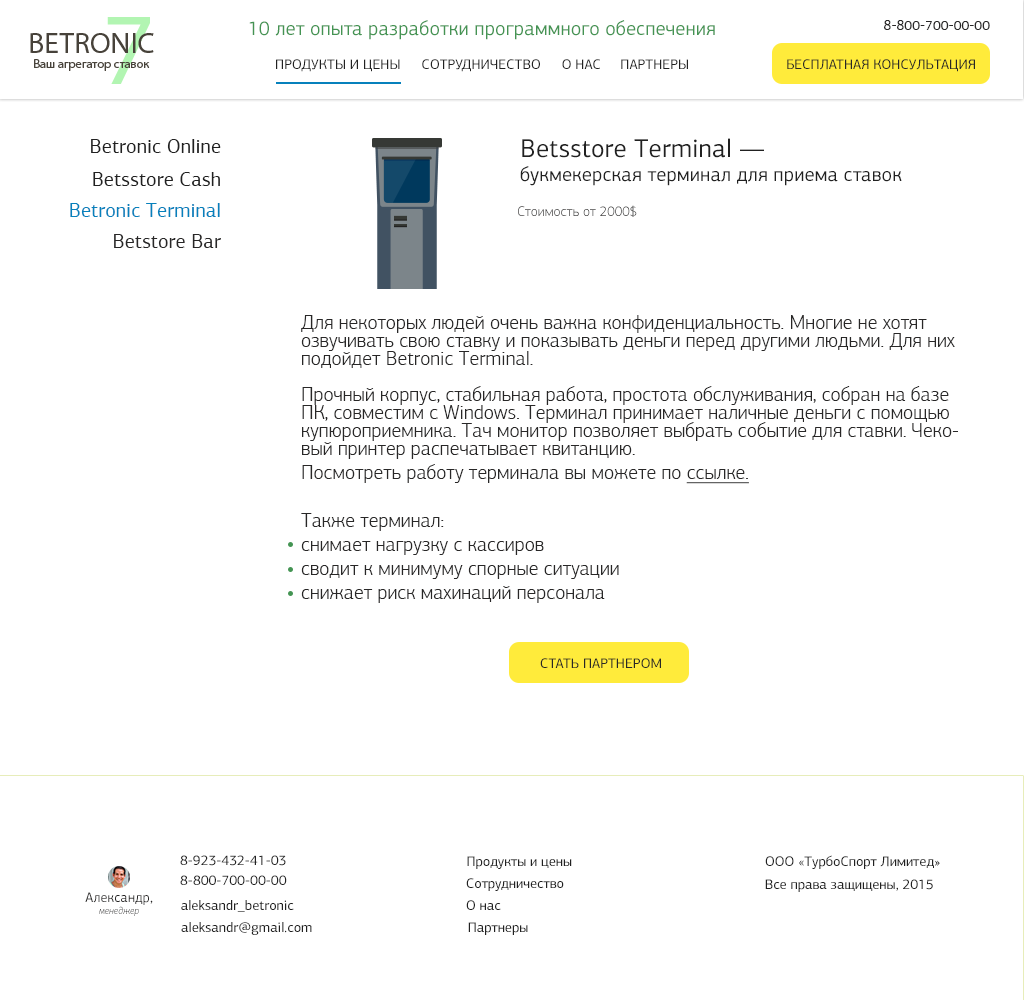
<style>
.page{position:relative;width:1024px;height:1000px;background:#ffffff}
.page>*{position:absolute;margin:0}
.t1{font:20px "PFAgoraSansPro-Regular";color:#449453}
.t2{font:14px "PFAgoraSansPro-Regular";color:#282727;text-transform:uppercase}
.t3{font:14px "PFAgoraSansPro-Regular";color:#212121;text-transform:uppercase}
.t4{font:20px "PFAgoraSansPro-Regular";color:#212121}
.t5{font:26.1px "PFAgoraSansPro-Regular";color:#212121}
.t6{font:20px/18px "PFAgoraSansPro-Regular";color:#212121}
.t7{font:20px "PFAgoraSansPro-Regular";color:#0681bc}
.t8{font:14px "PFAgoraSansPro-Light"}
.t9{font:20px "PFAgoraSansPro-Regular";color:#282727}
.t10{font:20px/18px "PFAgoraSansPro-Light";color:#282727}
.t11{font:20px "PFAgoraSansPro-Light";color:#282727}
.t12{font:20px "PFAgoraSansPro-Light";color:#282727;text-decoration:underline}
.t13{font:14.1px "PFAgoraSansPro-Regular";color:#212121;text-transform:uppercase}
.t14{font:14px "PFAgoraSansPro-Regular";color:#212121}
.t15{font:13.9px "PFAgoraSansPro-Regular";color:#212121}
.t16{font:13.9px "PFAgoraSansPro-Regular";color:#212121;text-transform:uppercase}
.t17{font:14px "PFAgoraSansPro-Regular";color:#282727}
.t18{font:10px "PFAgoraSansPro-LightItalic";color:#282727}
.t19{font:14.1px "PFAgoraSansPro-Regular";color:#212121}
</style>
<div class="page">
<p class="t1" style="left:249px;top:20px;width:466px;height:20px">10 лет опыта разработки программного обеспечения для букмекеров</p>
<p class="t2" style="left:884px;top:20px;width:106px;height:10px">8-800-700-00-00</p>
<p class="t3" style="left:276px;top:59px;width:124px;height:13px">продукты и цены</p>
<p class="t3" style="left:422px;top:59px;width:118px;height:13px">сотрудничество</p>
<p class="t3" style="left:562px;top:59px;width:38px;height:10px">о нас</p>
<p class="t3" style="left:621px;top:59px;width:67px;height:10px">партнеры</p>
<p class="t2" style="left:787px;top:59px;width:188px;height:13px">бесплатная консультация</p>
<p class="t4" style="left:91px;top:139px;width:130px;height:14px">Betronic Online</p>
<p class="t4" style="left:520px;top:138px;width:382px;height:48px"><span class="t5">Betsstore Terminal —<br></span>букмекерская терминал <span class="t6">для приема ставок</span></p>
<p class="t4" style="left:93px;top:172px;width:127px;height:14px">Betsstore Cash</p>
<p class="t7" style="left:70px;top:203px;width:150px;height:14px">Betronic Terminal</p>
<p class="t8" style="left:518px;top:205px;width:119px;height:12px">Стоимость от 2000$</p>
<p class="t9" style="left:114px;top:234px;width:107px;height:14px">Betstore Bar</p>
<p class="t10" style="left:301px;top:315px;width:657px;height:288px">Для некоторых людей очень важна конфиденциальность. Многие не хотят озвучивать свою ставку и показывать деньги перед другими людьми. Для них подойдет Betronic Terminal.<br><br>Прочный корпус, стабильная работа, простота обслуживания, собран на базе ПК, совместим с Windows. Терминал принимает наличные деньги с помощью купюроприемника. Тач монитор позволяет выбрать событие для ставки. Чековый принтер распечатывает квитанцию.<span class="t11"><br>Посмотреть работу терминала вы можете по </span><span class="t12">ссылке.<br><br></span><span class="t11">Также терминал:<br>снимает нагрузку с кассиров<br>сводит к минимуму спорные ситуации<br>снижает риск махинаций персонала</span></p>
<p class="t2" style="left:540px;top:658px;width:121px;height:10px">стать партнером</p>
<p class="t13" style="left:180px;top:855px;width:106px;height:11px">8-923-432-41-03</p>
<p class="t14" style="left:467px;top:856px;width:105px;height:13px">Продукты и цены</p>
<p class="t15" style="left:765px;top:855px;width:175px;height:14px"><span class="t16">OOO «</span>ТурбоСпорт Лимитед»</p>
<p class="t13" style="left:180px;top:875px;width:107px;height:10px">8-800-700-00-00</p>
<p class="t14" style="left:466px;top:878px;width:98px;height:13px">Сотрудничество</p>
<p class="t15" style="left:765px;top:879px;width:168px;height:13px">Все права защищены, 2015</p>
<p class="t17" style="left:85px;top:892px;width:68px;height:24px;text-align:center">Александр,<br><span class="t18">менеджер</span></p>
<p class="t19" style="left:181px;top:900px;width:113px;height:12px">aleksandr_betronic</p>
<p class="t14" style="left:466px;top:900px;width:35px;height:10px">О нас</p>
<p class="t19" style="left:181px;top:922px;width:131px;height:13px">aleksandr@gmail.com</p>
<p class="t14" style="left:468px;top:922px;width:60px;height:13px">Партнеры</p>
</div>
